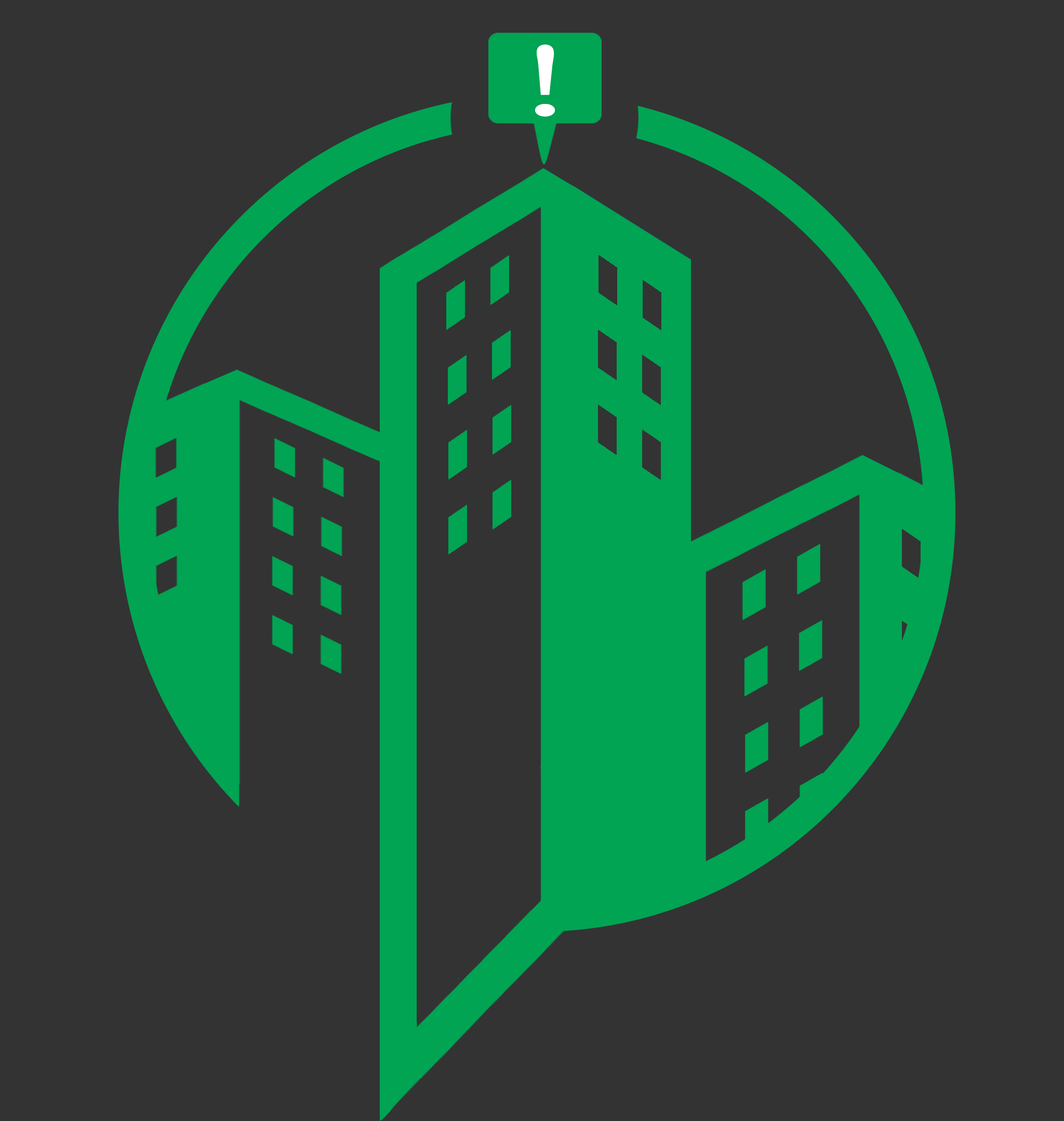
<style>
.page{position:relative;width:1064px;height:1121px;background:#333333}
.page>*{position:absolute;margin:0}
.t1{font:91.3px "InconsolataForPowerline-g";color:#ffffff;scale:1.57 1}
</style>
<div class="page">
<p class="t1" style="left:535px;top:44px;width:20px;height:73px">!</p>
</div>
